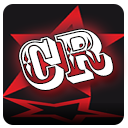
<style>
.page{position:relative;width:128px;height:128px;background:#ffffff}
.page>*{position:absolute;margin:0}
.t1{font:67.9px "RosewoodStd-Regular";color:#ffffff;scale:1.08 1}
</style>
<div class="page">
<p class="t1" style="left:19px;top:29px;width:94px;height:61px;rotate:-14deg">CR</p>
</div>
